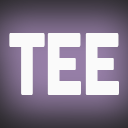
<style>
.page{position:relative;width:128px;height:128px;background:#fafafa}
.page>*{position:absolute;margin:0}
.t1{font:82.5px "COCOGOOSE";letter-spacing:-0.05em;color:#fafafa;font-variant:small-caps;scale:0.73 1}
</style>
<div class="page">
<p class="t1" style="left:9px;top:33px;width:110px;height:62px">TEE</p>
</div>
